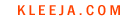
<style>
.page{position:relative;width:140px;height:20px;background:#ffffff}
.page>*{position:absolute;margin:0}
.t1{font:14.4px "FranklinGothic-MediumCond";letter-spacing:0.2em;color:#ff4200;text-transform:uppercase;scale:1.11 1}
</style>
<div class="page">
<p class="t1" style="left:18px;top:5px;width:102px;height:11px">kleeja.com</p>
</div>
